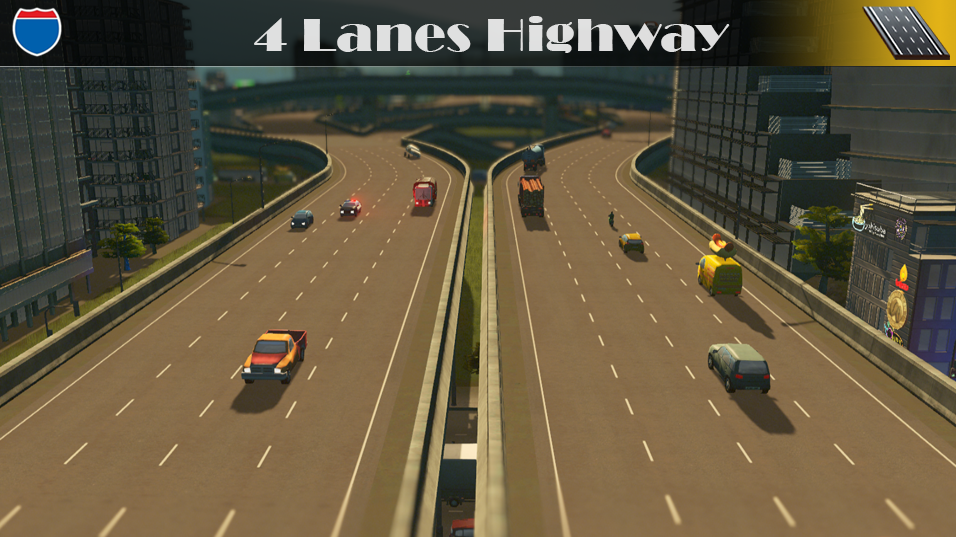
<style>
.page{position:relative;width:956px;height:537px}
.page>*{position:absolute;margin:0}
.t1{font:48px "Broadway";color:#dfe0e0;scale:1.11 1}
</style>
<div class="page">
<p class="t1" style="left:254px;top:16px;width:476px;height:37px">4 Lanes Highway</p>
</div>
